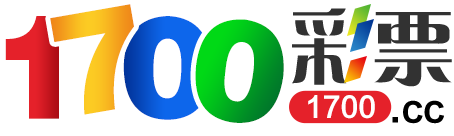
<style>
.page{position:relative;width:454px;height:136px;background:#ffffff}
.page>*{position:absolute;margin:0}
.t1{font:143.2px "FZCCHK--GBK1-0";color:#f8b820}
.t2{font:143.2px "FZCCHK--GBK1-0"}
.t3{font:82.6px "FZCQJW--GB1-0";letter-spacing:0.05em;color:#323232;scale:0.7 1}
.t4{font:82.4px "FZCQJW--GB1-0";letter-spacing:0.05em;color:#323232}
.t5{font:27.7px "FZLTCHJW--GB1-0";color:#ffffff}
.t6{font:36px "FZLTCHJW--GB1-0";color:#000000}
</style>
<div class="page">
<p class="t1" style="left:50px;top:4px;width:84px;height:111px;rotate:-10deg">7</p>
<p class="t2" style="left:5px;top:16px;width:54px;height:103px">1</p>
<p class="t2" style="left:123px;top:16px;width:89px;height:104px">0</p>
<p class="t3" style="left:292px;top:8px;width:55px;height:77px">采</p>
<p class="t4" style="left:374px;top:12px;width:78px;height:75px">票</p>
<p class="t2" style="left:195px;top:19px;width:89px;height:104px;rotate:6deg">0</p>
<p class="t5" style="left:308px;top:95px;width:67px;height:24px">1700</p>
<p class="t6" style="left:392px;top:100px;width:52px;height:24px">.cc</p>
</div>
